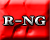
<style>
.page{position:relative;width:50px;height:40px}
.page>*{position:absolute;margin:0}
.t1{font:11.2px "MyungjoXB-HM";scale:1.53 1}
</style>
<div class="page">
<p class="t1" style="left:3px;top:16px;width:43px;height:9px">R-NG</p>
</div>
